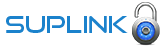
<style>
.page{position:relative;width:160px;height:46px;background:#ffffff}
.page>*{position:absolute;margin:0}
.t1{font:23px "GoodTimesRg-Regular";color:#1b82cc}
</style>
<div class="page">
<p class="t1" style="left:6px;top:16px;width:122px;height:17px">SUplink</p>
</div>
